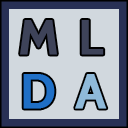
<style>
.page{position:relative;width:128px;height:128px;background:#d1d8de}
.page>*{position:absolute;margin:0}
.t1{font:48px "Cabin-SemiBold";letter-spacing:-0.05em;color:#3e4359;font-weight:bold}
.t2{font:48px "Cabin-SemiBold";letter-spacing:-0.05em;color:#1f6fc6;font-weight:bold}
.t3{font:48px "Cabin-SemiBold";letter-spacing:-0.05em;color:#8fbada;font-weight:bold}
</style>
<div class="page">
<p class="t1" style="left:81px;top:20px;width:23px;height:35px">L</p>
<p class="t2" style="left:23px;top:74px;width:32px;height:35px">D</p>
<p class="t3" style="left:75px;top:74px;width:32px;height:35px">A</p>
</div>
